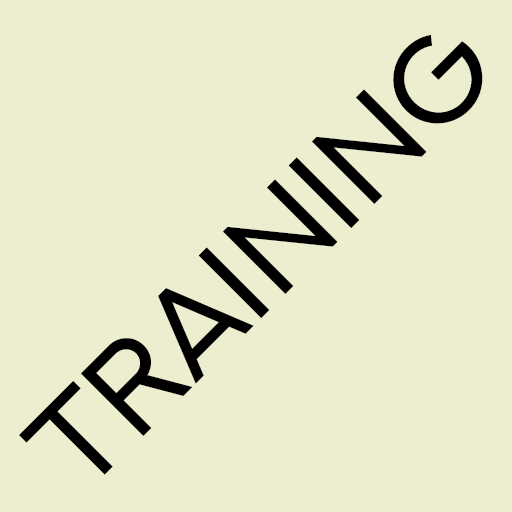
<style>
.page{position:relative;width:512px;height:512px;background:#edeed0}
.page>*{position:absolute;margin:0}
.t1{font:30.2px "NEXTART-Regular";color:#000000}
</style>
<div class="page">
<p class="t1" style="left:19px;top:35px;width:464px;height:440px;rotate:-45deg">TRAINING</p>
</div>
